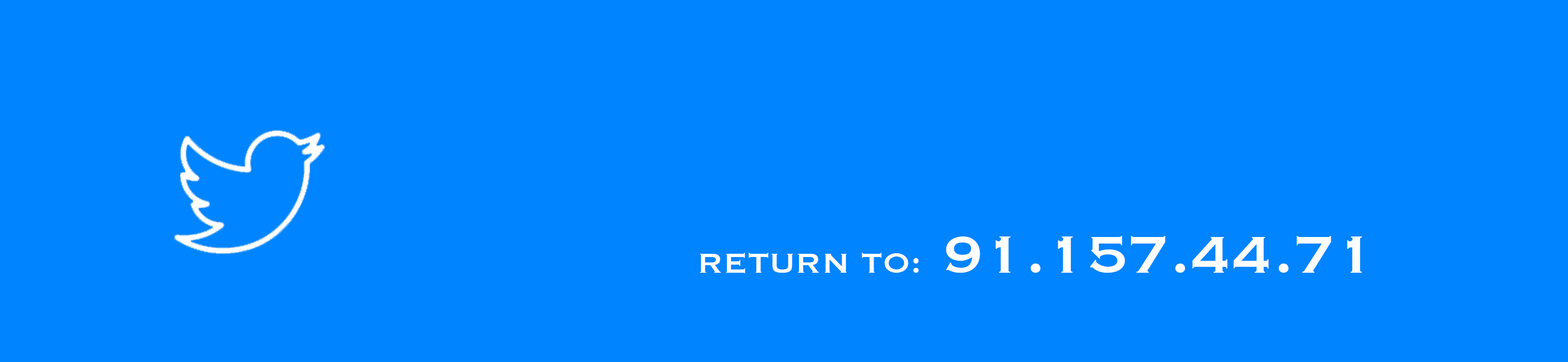
<style>
.page{position:relative;width:1568px;height:362px;background:#0084ff}
.page>*{position:absolute;margin:0}
.t1{font:67.7px "Copperplate";color:#ffffff}
.t2{font:36.1px "Copperplate";color:#ffffff}
</style>
<div class="page">
<p class="t1" style="left:700px;top:236px;width:662px;height:38px"><span class="t2">RETURN TO:</span> 91.157.44.71</p>
</div>
